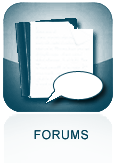
<style>
.page{position:relative;width:117px;height:163px}
.page>*{position:absolute;margin:0}
.t1{font:12px "ArialMT";letter-spacing:0.05em;color:#024157}
</style>
<div class="page">
<p class="t1" style="left:34px;top:130px;width:54px;height:10px">FORUMS</p>
</div>
